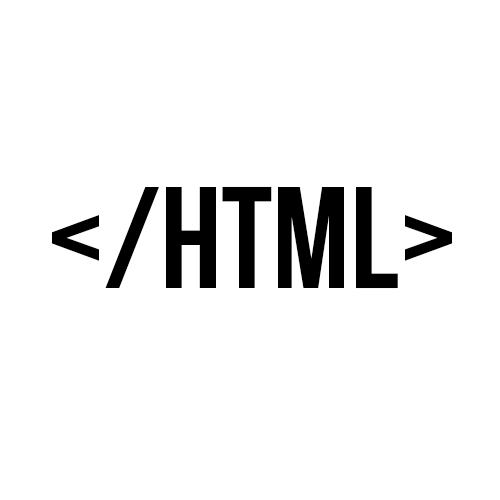
<style>
.page{position:relative;width:500px;height:500px;background:#ffffff}
.page>*{position:absolute;margin:0}
.t1{font:144px "BebasNeueBold";color:#000000}
</style>
<div class="page">
<p class="t1" style="left:52px;top:186px;width:400px;height:103px">&lt;/html&gt;</p>
</div>
